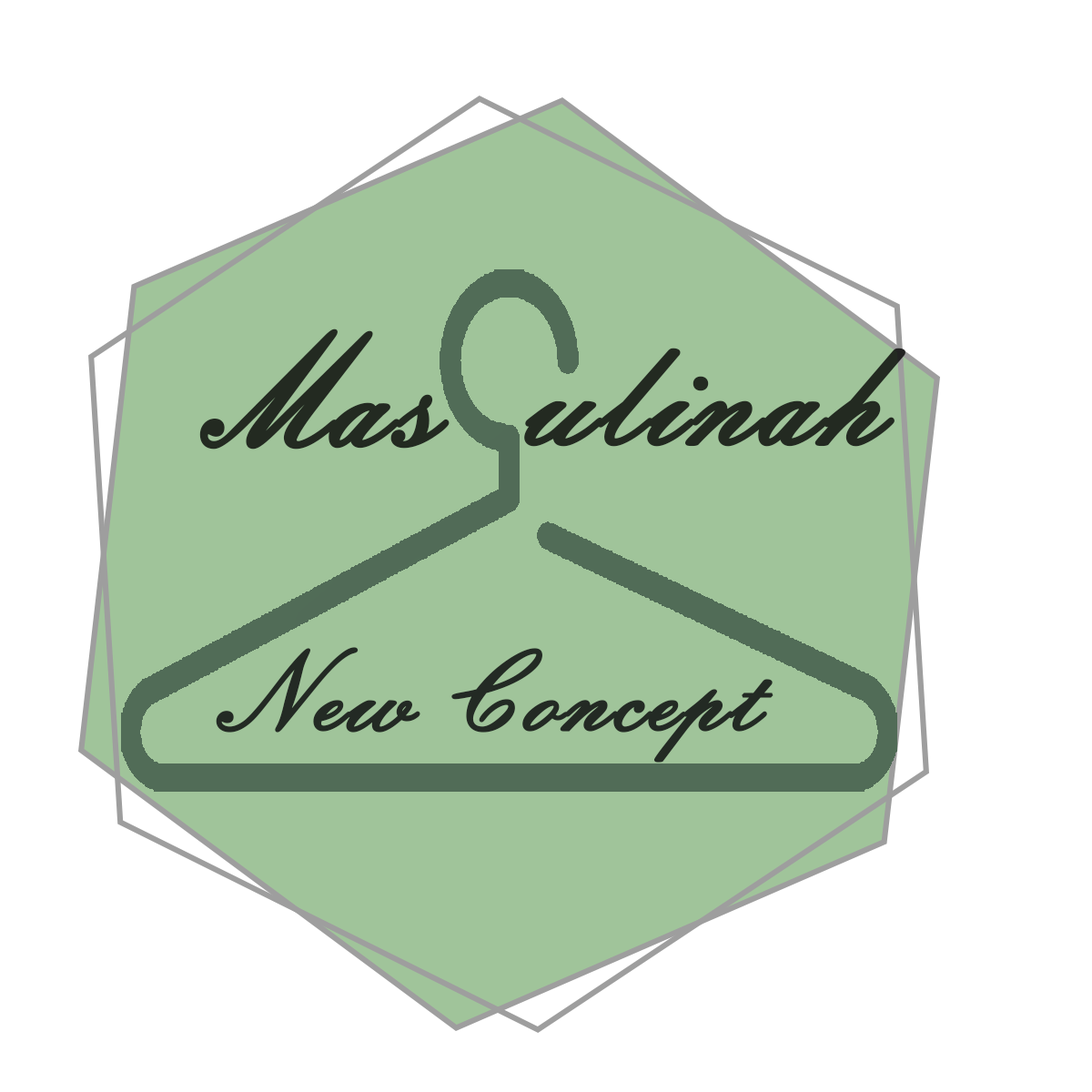
<style>
.page{position:relative;width:1092px;height:1092px;background:#ffffff}
.page>*{position:absolute;margin:0}
.t1{font:154.7px "EmbassyBT-Regular";color:#232a21;font-weight:bold}
.t2{font:154.7px "EmbassyBT-Regular";color:#232a21;text-transform:uppercase;font-weight:bold}
.t3{font:109.2px "EmbassyBT-Regular";color:#232a24;font-weight:bold}
</style>
<div class="page">
<p class="t1" style="left:199px;top:329px;width:251px;height:121px"><span class="t2">M</span>as</p>
<p class="t1" style="left:524px;top:348px;width:381px;height:99px">ulinah</p>
<p class="t3" style="left:216px;top:647px;width:557px;height:116px">New Concept</p>
</div>
